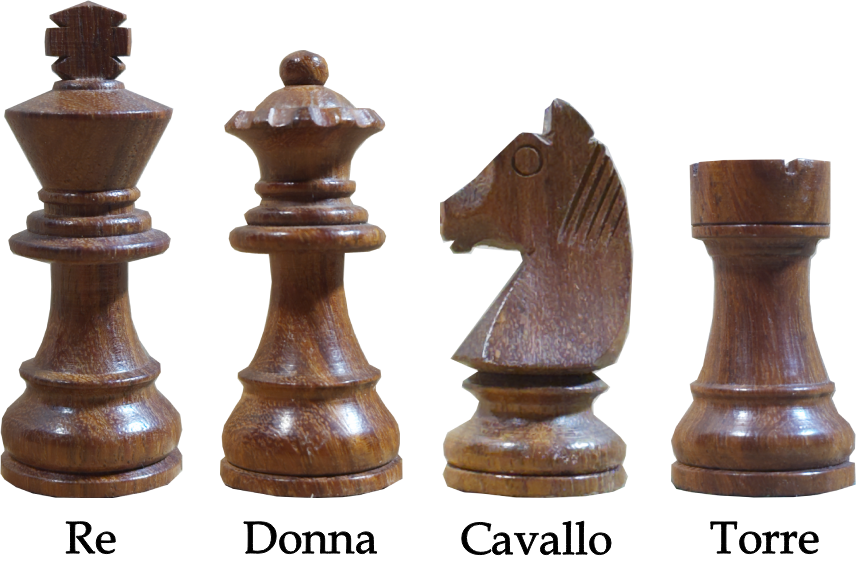
<style>
.page{position:relative;width:856px;height:566px;background:#ffffff}
.page>*{position:absolute;margin:0}
.t1{font:45px "BookAntiqua";color:#000000}
</style>
<div class="page">
<p class="t1" style="left:65px;top:520px;width:52px;height:35px">Re</p>
<p class="t1" style="left:242px;top:520px;width:136px;height:35px">Donna</p>
<p class="t1" style="left:460px;top:520px;width:153px;height:36px">Cavallo</p>
<p class="t1" style="left:709px;top:520px;width:111px;height:35px">Torre</p>
</div>
